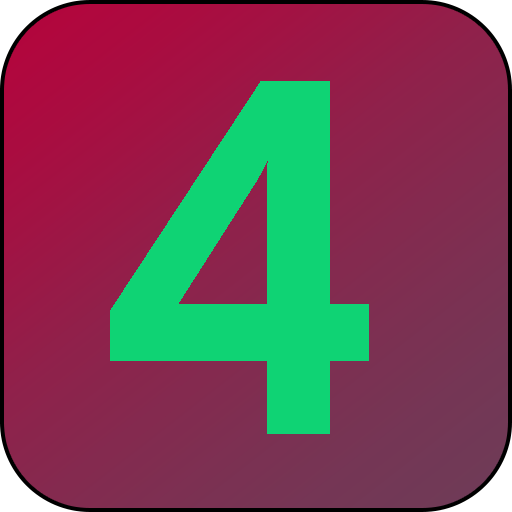
<style>
.page{position:relative;width:512px;height:512px}
.page>*{position:absolute;margin:0}
.t1{font:408.3px "FZLTTHK--GBK1-0";color:#0fd374;scale:0.91 1}
</style>
<div class="page">
<p class="t1" style="left:110px;top:81px;width:259px;height:353px">4</p>
</div>
